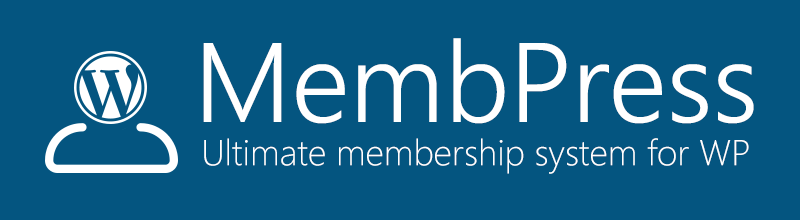
<style>
.page{position:relative;width:800px;height:220px;background:#045580}
.page>*{position:absolute;margin:0}
.t1{font:36px "SegoeUI-Light";color:#ffffff}
.t2{font:113px "SegoeUI-Semilight";color:#ffffff}
</style>
<div class="page">
<p class="t1" style="left:203px;top:38px;width:551px;height:136px;text-align:center"><span class="t2">MembPress<br></span>Ultimate membership system for WP</p>
</div>
